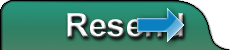
<style>
.page{position:relative;width:230px;height:50px}
.page>*{position:absolute;margin:0}
.t1{font:33.3px "Arial-BoldMT"}
</style>
<div class="page">
<p class="t1" style="left:67px;top:13px;width:116px;height:25px">Resend</p>
<p class="t1" style="left:67px;top:13px;width:116px;height:25px">Resend</p>
</div>
